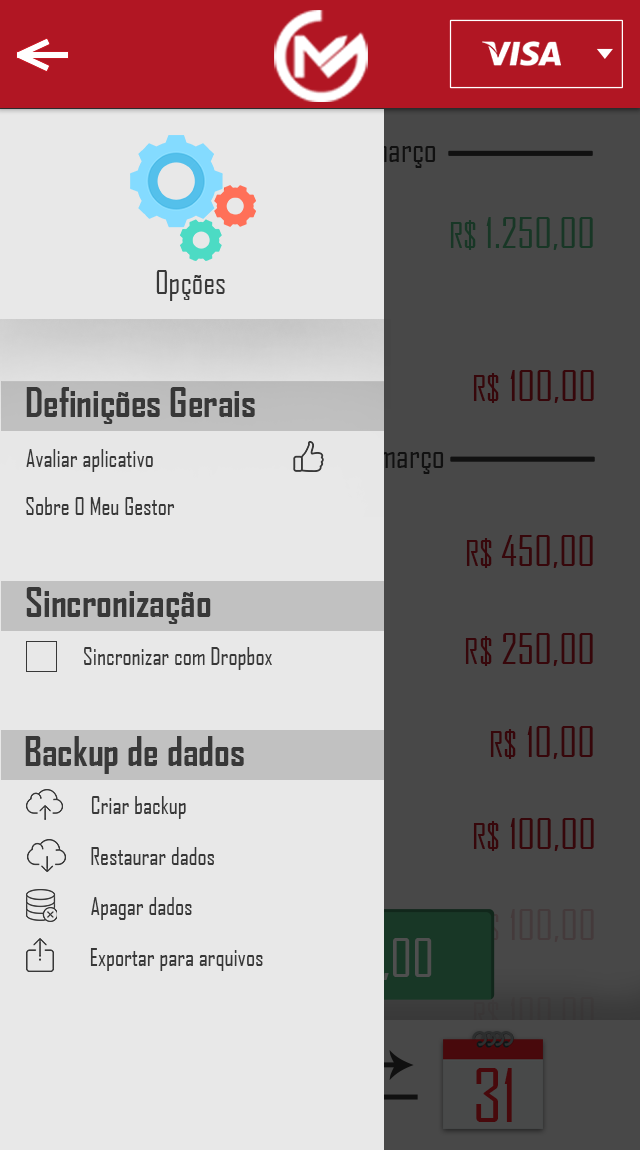
<style>
.page{position:relative;width:640px;height:1150px;background:#e8e8e8}
.page>*{position:absolute;margin:0}
.t1{font:30.8px "AgencyFB-Reg";color:#383838}
.t2{font:38.8px "AgencyFB-Bold";color:#383838}
.t3{font:23.8px "AgencyFB-Reg";color:#383838}
</style>
<div class="page">
<p class="t1" style="left:156px;top:270px;width:69px;height:31px">Opções</p>
<p class="t2" style="left:26px;top:387px;width:229px;height:37px">Definições Gerais</p>
<p class="t3" style="left:26px;top:449px;width:127px;height:23px">Avaliar aplicativo</p>
<p class="t3" style="left:26px;top:497px;width:149px;height:18px">Sobre O Meu Gestor</p>
<p class="t2" style="left:26px;top:587px;width:185px;height:37px">Sincronização</p>
<p class="t3" style="left:84px;top:647px;width:188px;height:23px">Sincronizar com Dropbox</p>
<p class="t2" style="left:25px;top:736px;width:219px;height:38px">Backup de dados</p>
<p class="t3" style="left:91px;top:796px;width:95px;height:23px">Criar backup</p>
<p class="t3" style="left:91px;top:847px;width:123px;height:18px">Restaurar dados</p>
<p class="t3" style="left:91px;top:897px;width:101px;height:23px">Apagar dados</p>
<p class="t3" style="left:90px;top:948px;width:173px;height:23px">Exportar para arquivos</p>
</div>
